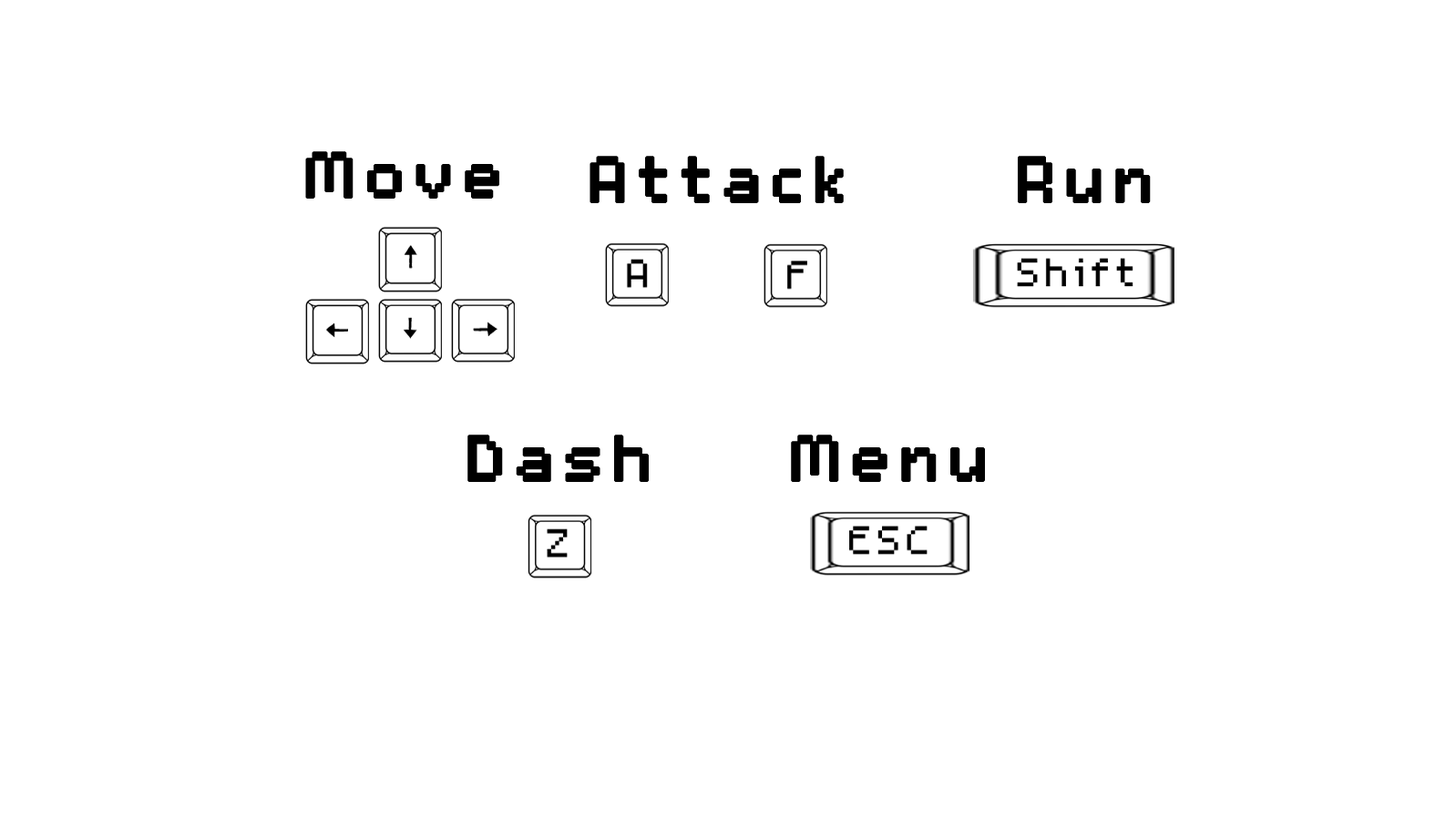
<style>
.page{position:relative;width:1456px;height:819px;background:#ffffff}
.page>*{position:absolute;margin:0}
.t1{font:101.2px "m5x7";letter-spacing:0.08em;color:#000000;font-weight:bold}
</style>
<div class="page">
<p class="t1" style="left:305px;top:151px;width:194px;height:48px">Move</p>
<p class="t1" style="left:589px;top:156px;width:255px;height:47px">Attack</p>
<p class="t1" style="left:1018px;top:156px;width:133px;height:47px">Run</p>
<p class="t1" style="left:467px;top:435px;width:182px;height:47px">Dash</p>
<p class="t1" style="left:791px;top:435px;width:194px;height:47px">Menu</p>
</div>
